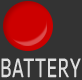
<style>
.page{position:relative;width:82px;height:80px;background:#333333}
.page>*{position:absolute;margin:0}
.t1{font:25.6px "Commissioner-Regular";letter-spacing:0.05em;color:#dedede;scale:0.67 1}
</style>
<div class="page">
<p class="t1" style="left:1px;top:58px;width:80px;height:20px">BATTERY</p>
</div>
